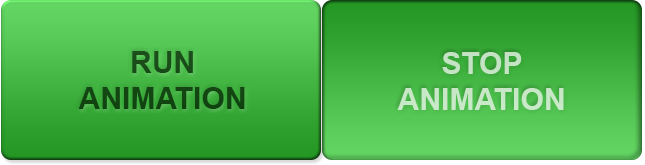
<style>
.page{position:relative;width:645px;height:165px}
.page>*{position:absolute;margin:0}
.t1{font:30px "Arial-BoldMT";color:#134613}
.t2{font:30px "Arial-BoldMT";color:#c7e7c7}
</style>
<div class="page">
<p class="t1" style="left:78px;top:51px;width:167px;height:58px;text-align:center">RUN<br>ANIMATION</p>
<p class="t2" style="left:397px;top:52px;width:167px;height:58px;text-align:center">STOP<br>ANIMATION</p>
</div>
